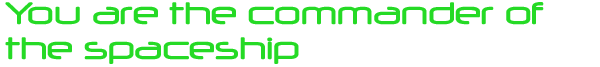
<style>
.page{position:relative;width:600px;height:67px;background:#ffffff}
.page>*{position:absolute;margin:0}
.t1{font:37px "Neuropol";color:#25da25}
</style>
<div class="page">
<p class="t1" style="left:5px;top:2px;width:539px;height:62px">You are the commander of the spaceship</p>
</div>
